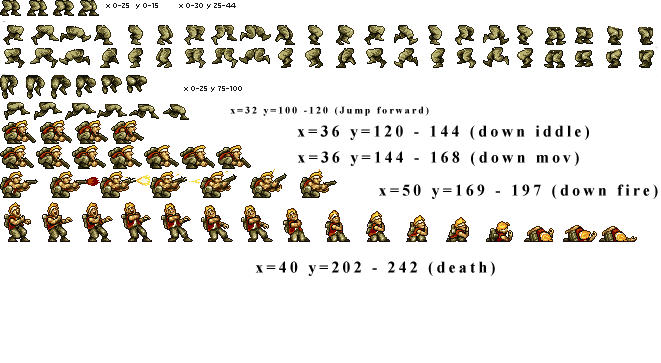
<style>
.page{position:relative;width:661px;height:363px;background:#ffffff}
.page>*{position:absolute;margin:0}
.t1{font:10px "TimesNewRomanPS-BoldMT";letter-spacing:0.2em;color:#000000}
.t2{font:15.9px "TimesNewRomanPS-BoldMT";letter-spacing:0.2em;color:#000000}
</style>
<div class="page">
<p class="t1" style="left:230px;top:106px;width:199px;height:10px">x=32 y=100 -120 (Jump forward)</p>
<p class="t2" style="left:297px;top:125px;width:292px;height:15px">x=36 y=120 - 144 (down iddle)</p>
<p class="t2" style="left:297px;top:151px;width:282px;height:15px">x=36 y=144 - 168 (down mov)</p>
<p class="t2" style="left:379px;top:184px;width:279px;height:15px">x=50 y=169 - 197 (down fire)</p>
<p class="t2" style="left:255px;top:261px;width:240px;height:15px">x=40 y=202 - 242 (death)</p>
</div>
